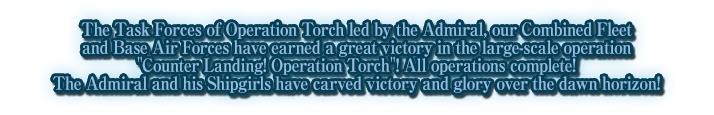
<style>
.page{position:relative;width:714px;height:115px;background:#ffffff}
.page>*{position:absolute;margin:0}
.t1{font:18px/18px "RyuminPro-ExBold";letter-spacing:-0.04em;color:#93bee0;scale:0.9 1}
</style>
<div class="page">
<p class="t1" style="left:53px;top:22px;width:607px;height:71px;text-align:center">The Task Forces of Operation Torch led by the Admiral, our Combined Fleet<br>and Base Air Forces have earned a great victory in the large-scale operation<br>"Counter Landing! Operation Torch"! All operations complete!<br>The Admiral and his Shipgirls have carved victory and glory over the dawn horizon!</p>
</div>
